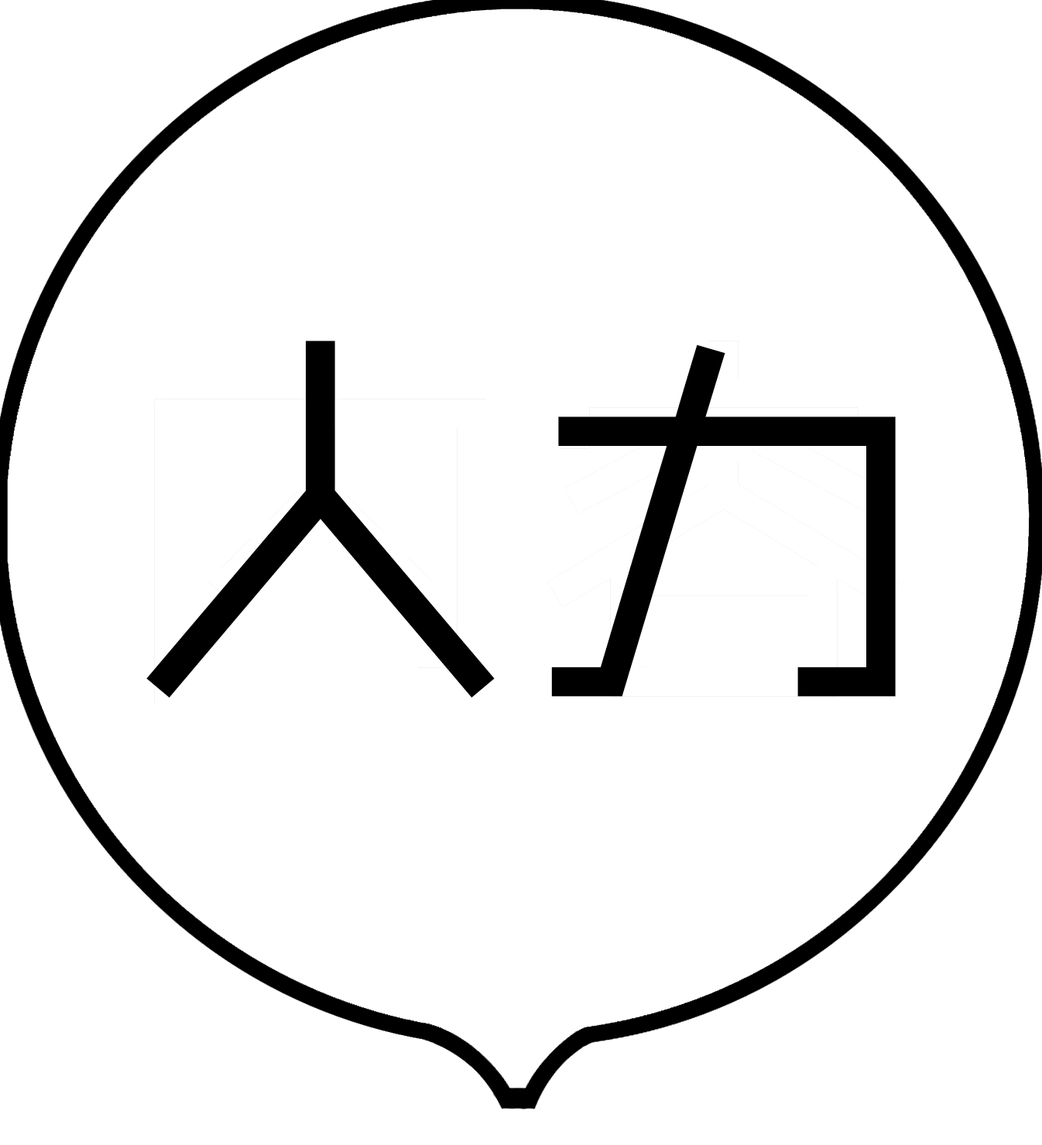
<style>
.page{position:relative;width:1042px;height:1145px;background:#ffffff}
.page>*{position:absolute;margin:0}
.t1{font:403.1px "RTWSShangGoG0v1-Regular";color:#000000}
</style>
<div class="page">
<p class="t1" style="left:146px;top:341px;width:749px;height:356px">人力</p>
</div>
